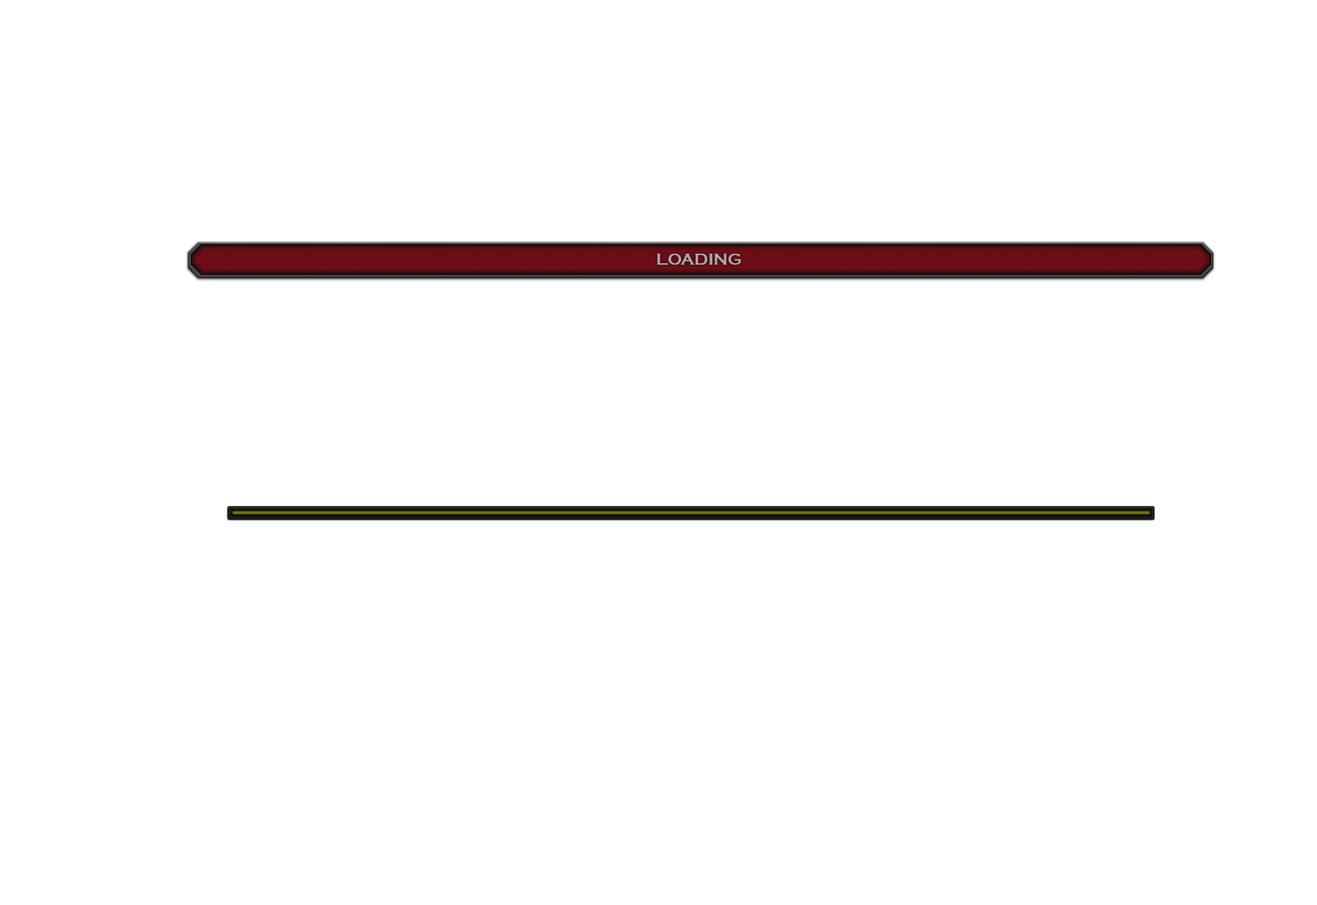
<style>
.page{position:relative;width:1317px;height:905px;background:#ffffff}
.page>*{position:absolute;margin:0}
.t1{font:16.5px "CopperplateGothic-Bold";color:#aaaaaa;font-variant:small-caps}
</style>
<div class="page">
<p class="t1" style="left:656px;top:254px;width:85px;height:11px">LOADING</p>
</div>
